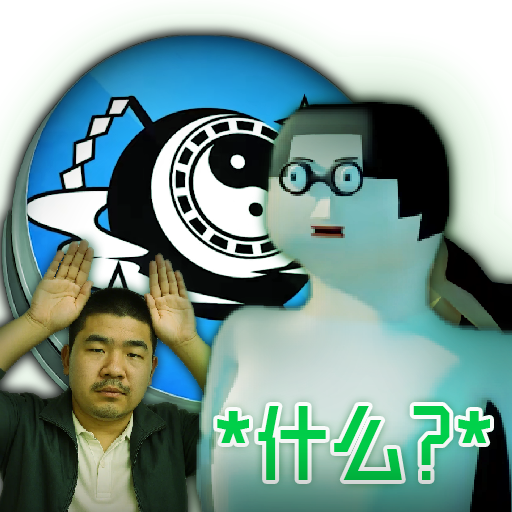
<style>
.page{position:relative;width:512px;height:512px}
.page>*{position:absolute;margin:0}
.t1{font:83.3px "ChuangkitKingKongRegular";color:#00cb48;scale:0.92 1}
</style>
<div class="page">
<p class="t1" style="left:217px;top:406px;width:273px;height:74px">*什么?*</p>
</div>
